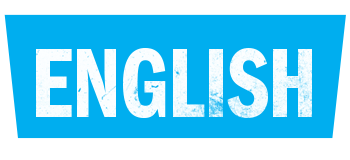
<style>
.page{position:relative;width:350px;height:160px;background:#00aeef}
.page>*{position:absolute;margin:0}
.t1{font:102.6px "ITCFranklinGothicStd-DmCp";letter-spacing:-0.01em;color:#ffffff}
</style>
<div class="page">
<p class="t1" style="left:36px;top:48px;width:276px;height:71px">ENGLISH</p>
</div>
